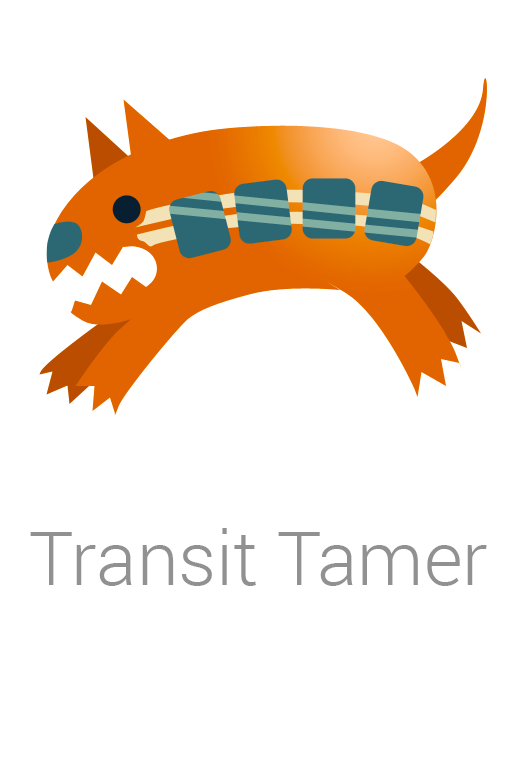
<style>
.page{position:relative;width:512px;height:768px;background:#ffffff}
.page>*{position:absolute;margin:0}
.t1{font:75px "Roboto-Light";color:#919191}
</style>
<div class="page">
<p class="t1" style="left:30px;top:528px;width:457px;height:58px">Transit Tamer</p>
</div>
